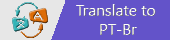
<style>
.page{position:relative;width:170px;height:40px;background:#6353c9}
.page>*{position:absolute;margin:0}
.t1{font:16px "SegoeUI";letter-spacing:-0.01em;color:#fefefe}
</style>
<div class="page">
<p class="t1" style="left:76px;top:4px;width:80px;height:31px;text-align:center">Translate to <br>PT-Br</p>
</div>
